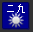
<style>
.page{position:relative;width:33px;height:32px;background:#000090}
.page>*{position:absolute;margin:0}
.t1{font:10.4px "SimSun";color:#ffffff}
</style>
<div class="page">
<p class="t1" style="left:7px;top:4px;width:18px;height:9px">二九</p>
</div>
